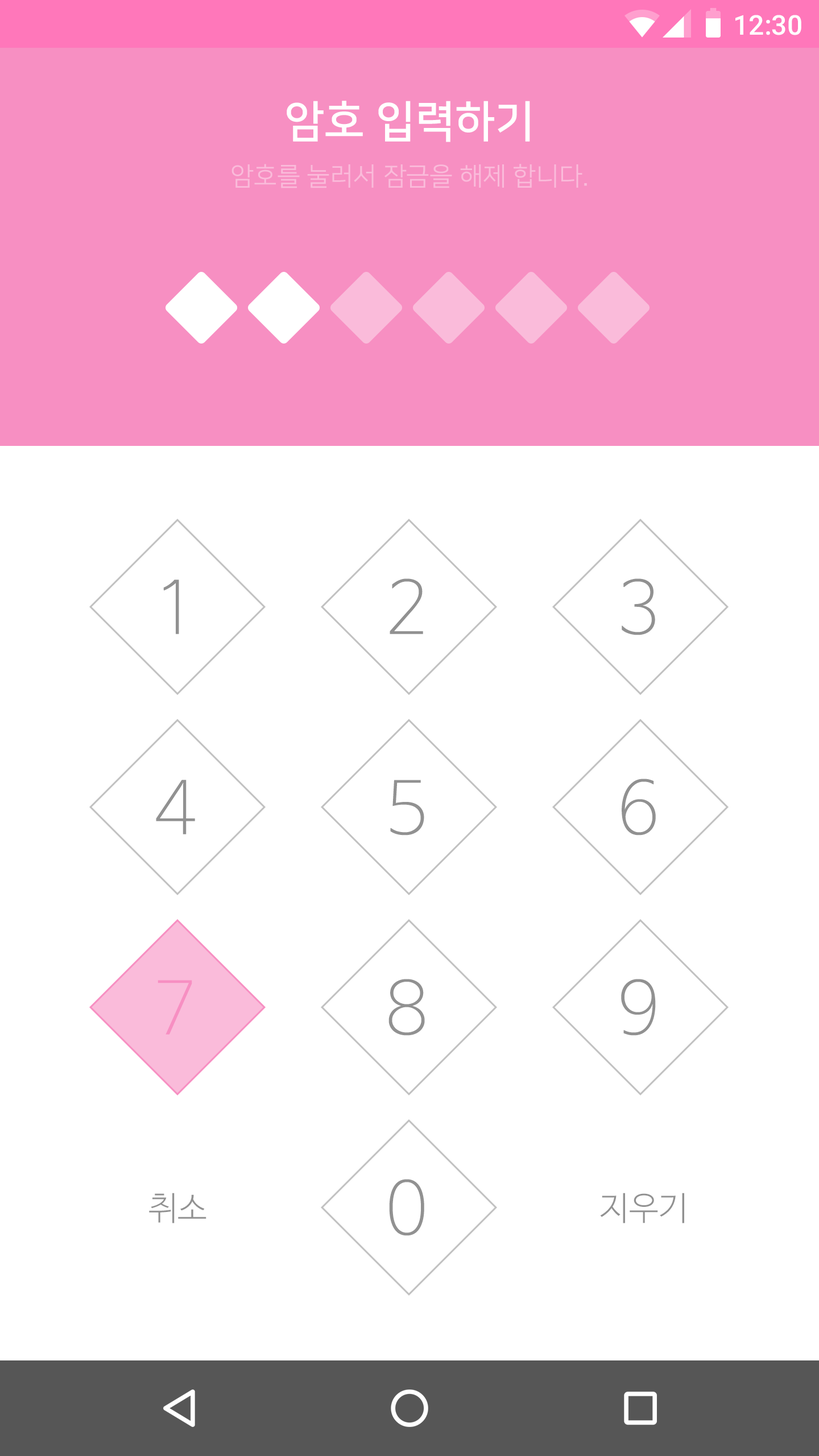
<style>
.page{position:relative;width:819px;height:1456px;background:#ffffff}
.page>*{position:absolute;margin:0}
.t1{font:27.3px "Roboto-Medium";color:#ffffff}
.t2{font:25.6px/38.7px "NanumSquareR";color:#fabbda}
.t3{font:43.8px/10.2px "NanumSquareB";color:#ffffff}
.t4{font:72.8px "NanumBarunGothicUltraLight";color:#919191}
.t5{font:72.8px "NanumBarunGothicUltraLight";color:#f78fc2}
.t6{font:33px "NanumBarunGothicLight";color:#919191}
</style>
<div class="page">
<p class="t1" style="left:735px;top:15px;width:66px;height:20px">12:30</p>
<p class="t2" style="left:231px;top:101px;width:356px;height:87px;text-align:center"><span class="t3">암호 입력하기<br><br></span>암호를 눌러서 잠금을 해제 합니다.</p>
<p class="t4" style="left:163px;top:580px;width:16px;height:54px">1</p>
<p class="t4" style="left:390px;top:578px;width:33px;height:56px">2</p>
<p class="t4" style="left:622px;top:578px;width:33px;height:57px">3</p>
<p class="t4" style="left:156px;top:780px;width:39px;height:54px">4</p>
<p class="t4" style="left:390px;top:780px;width:34px;height:55px">5</p>
<p class="t4" style="left:622px;top:779px;width:34px;height:56px">6</p>
<p class="t5" style="left:158px;top:980px;width:34px;height:55px">7</p>
<p class="t4" style="left:388px;top:979px;width:37px;height:57px">8</p>
<p class="t4" style="left:621px;top:979px;width:35px;height:57px">9</p>
<p class="t4" style="left:389px;top:1179px;width:35px;height:57px">0</p>
<p class="t6" style="left:149px;top:1193px;width:57px;height:30px">취소</p>
<p class="t6" style="left:600px;top:1193px;width:84px;height:30px">지우기</p>
</div>
